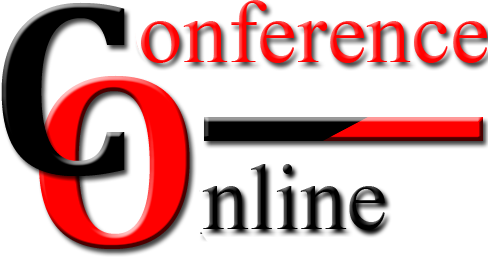
<style>
.page{position:relative;width:488px;height:257px;background:#ffffff}
.page>*{position:absolute;margin:0}
.t1{font:89.2px "TimesNewRomanPSMT";color:#ff0000}
.t2{font:92.8px "TimesNewRomanPSMT";color:#000000}
</style>
<div class="page">
<p class="t1" style="left:141px;top:0px;width:346px;height:63px">onference</p>
<p class="t2" style="left:202px;top:164px;width:183px;height:66px">nline</p>
</div>
